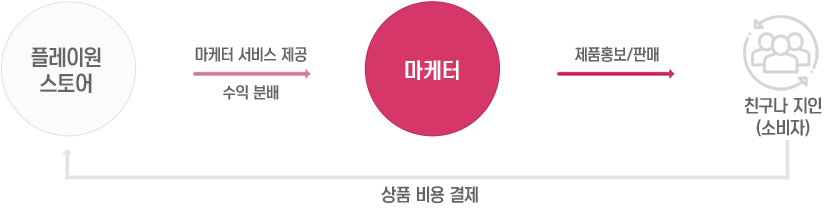
<style>
.page{position:relative;width:830px;height:208px;background:#ffffff}
.page>*{position:absolute;margin:0}
.t1{font:22px "YoonMeolijeongche2M";color:#656565}
.t2{font:16px "YoonMeolijeongche2M";color:#656565}
.t3{font:22px "YoonMeolijeongche2M";letter-spacing:0.05em;color:#ffffff}
.t4{font:18px "YoonMeolijeongche2M";color:#656565}
</style>
<div class="page">
<p class="t1" style="left:31px;top:47px;width:70px;height:46px;text-align:center">플레이원<br>스토어</p>
<p class="t2" style="left:195px;top:47px;width:112px;height:53px;text-align:center">마케터 서비스 제공<br><br>수익 분배</p>
<p class="t2" style="left:575px;top:46px;width:84px;height:16px">제품홍보/판매</p>
<p class="t3" style="left:405px;top:60px;width:54px;height:20px">마케터</p>
<p class="t4" style="left:744px;top:97px;width:78px;height:40px;text-align:center">친구나 지인<br>(소비자)</p>
<p class="t4" style="left:381px;top:186px;width:97px;height:18px">상품 비용 결제</p>
</div>
